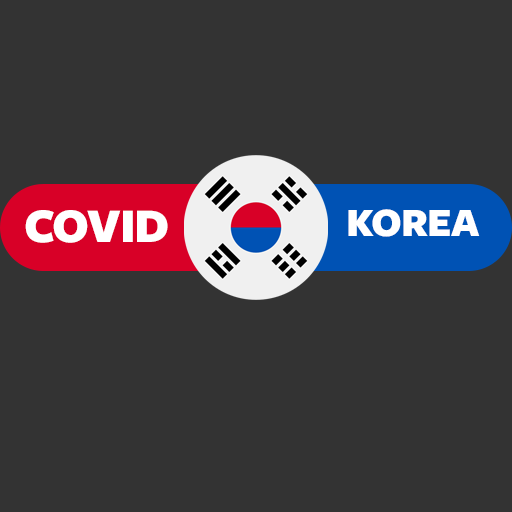
<style>
.page{position:relative;width:512px;height:512px;background:#333333}
.page>*{position:absolute;margin:0}
.t1{font:41.7px "Freight-SansBlack";letter-spacing:-0.02em;color:#ffffff;text-transform:uppercase}
.t2{font:50px "Freight-SansBlack";letter-spacing:-0.02em;color:#ffffff;text-transform:uppercase}
</style>
<div class="page">
<p class="t1" style="left:348px;top:209px;width:132px;height:28px">korea</p>
<p class="t2" style="left:25px;top:210px;width:143px;height:33px">covid</p>
</div>
